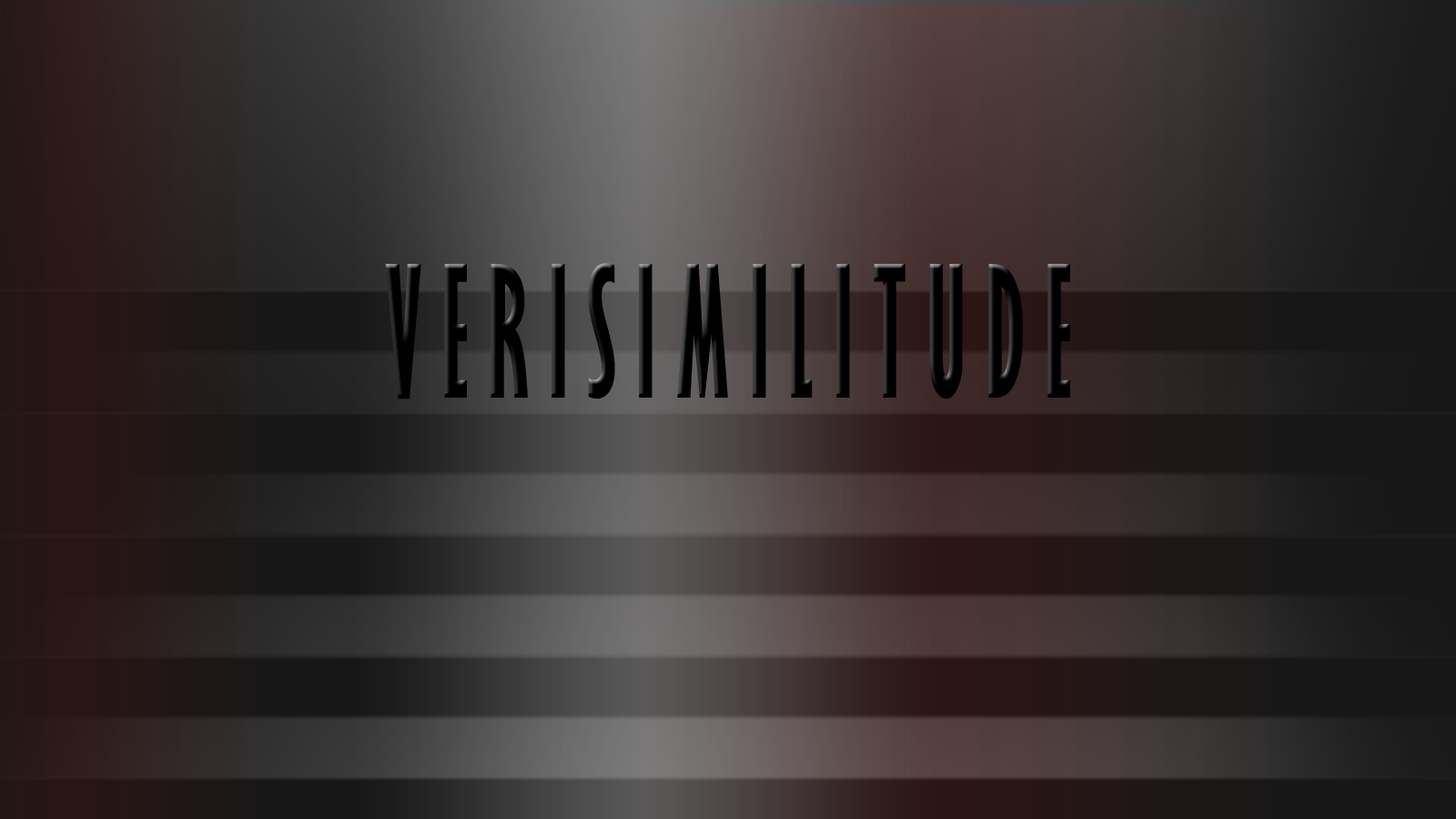
<style>
.page{position:relative;width:1456px;height:819px}
.page>*{position:absolute;margin:0}
.t1{font:167.7px "GillSansMT-ExtraCondensedBold";color:#000000;scale:0.73 1}
</style>
<div class="page">
<p class="t1" style="left:385px;top:263px;width:685px;height:136px">V E R I S I M I L I T U D E</p>
</div>
